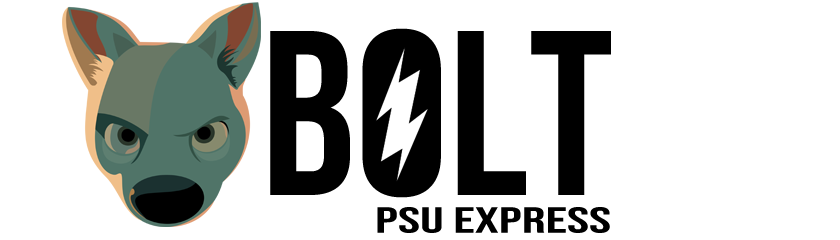
<style>
.page{position:relative;width:840px;height:240px;background:#ffffff}
.page>*{position:absolute;margin:0}
.t1{font:234px "BebasNeue-Regular";color:#000000}
.t2{font:36.2px "BebasNeue-Regular";color:#000000;scale:1.63 1}
</style>
<div class="page">
<p class="t1" style="left:270px;top:28px;width:341px;height:170px">Bolt</p>
<p class="t2" style="left:377px;top:207px;width:233px;height:26px">psu express</p>
</div>
